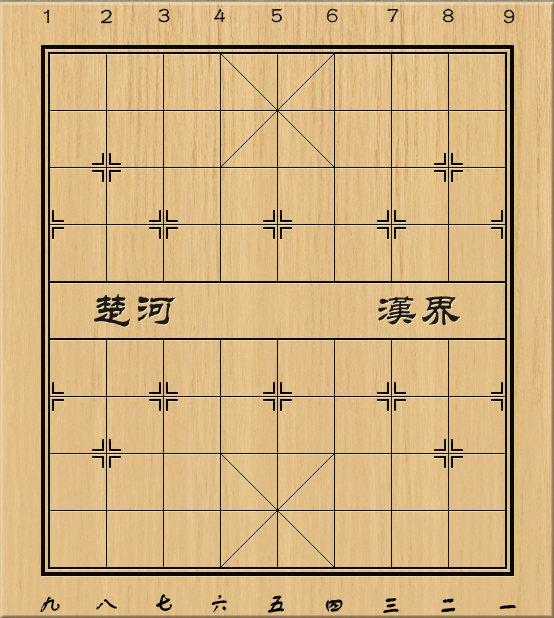
<style>
.page{position:relative;width:554px;height:618px}
.page>*{position:absolute;margin:0}
.t1{font:24px "FZSTK--GBK1-0"}
.t2{font:24px "FZSTK--GBK1-0";color:#000000}
</style>
<div class="page">
<p class="t1" style="left:43px;top:9px;width:7px;height:15px">1</p>
<p class="t2" style="left:101px;top:9px;width:11px;height:15px">2</p>
<p class="t2" style="left:158px;top:8px;width:12px;height:15px">3</p>
<p class="t2" style="left:214px;top:8px;width:12px;height:15px">4</p>
<p class="t2" style="left:271px;top:8px;width:11px;height:15px">5</p>
<p class="t2" style="left:327px;top:8px;width:11px;height:15px">6</p>
<p class="t2" style="left:387px;top:8px;width:12px;height:15px">7</p>
<p class="t2" style="left:443px;top:8px;width:11px;height:15px">8</p>
<p class="t2" style="left:504px;top:9px;width:11px;height:15px">9</p>
<p class="t2" style="left:40px;top:596px;width:20px;height:16px">九</p>
<p class="t2" style="left:96px;top:599px;width:21px;height:11px">八</p>
<p class="t2" style="left:156px;top:594px;width:16px;height:17px">七</p>
<p class="t2" style="left:211px;top:595px;width:17px;height:18px">六</p>
<p class="t2" style="left:267px;top:595px;width:18px;height:18px">五</p>
<p class="t2" style="left:325px;top:599px;width:18px;height:13px">四</p>
<p class="t2" style="left:383px;top:598px;width:16px;height:15px">三</p>
<p class="t2" style="left:441px;top:598px;width:15px;height:15px">二</p>
<p class="t2" style="left:499px;top:605px;width:17px;height:5px">一</p>
</div>
